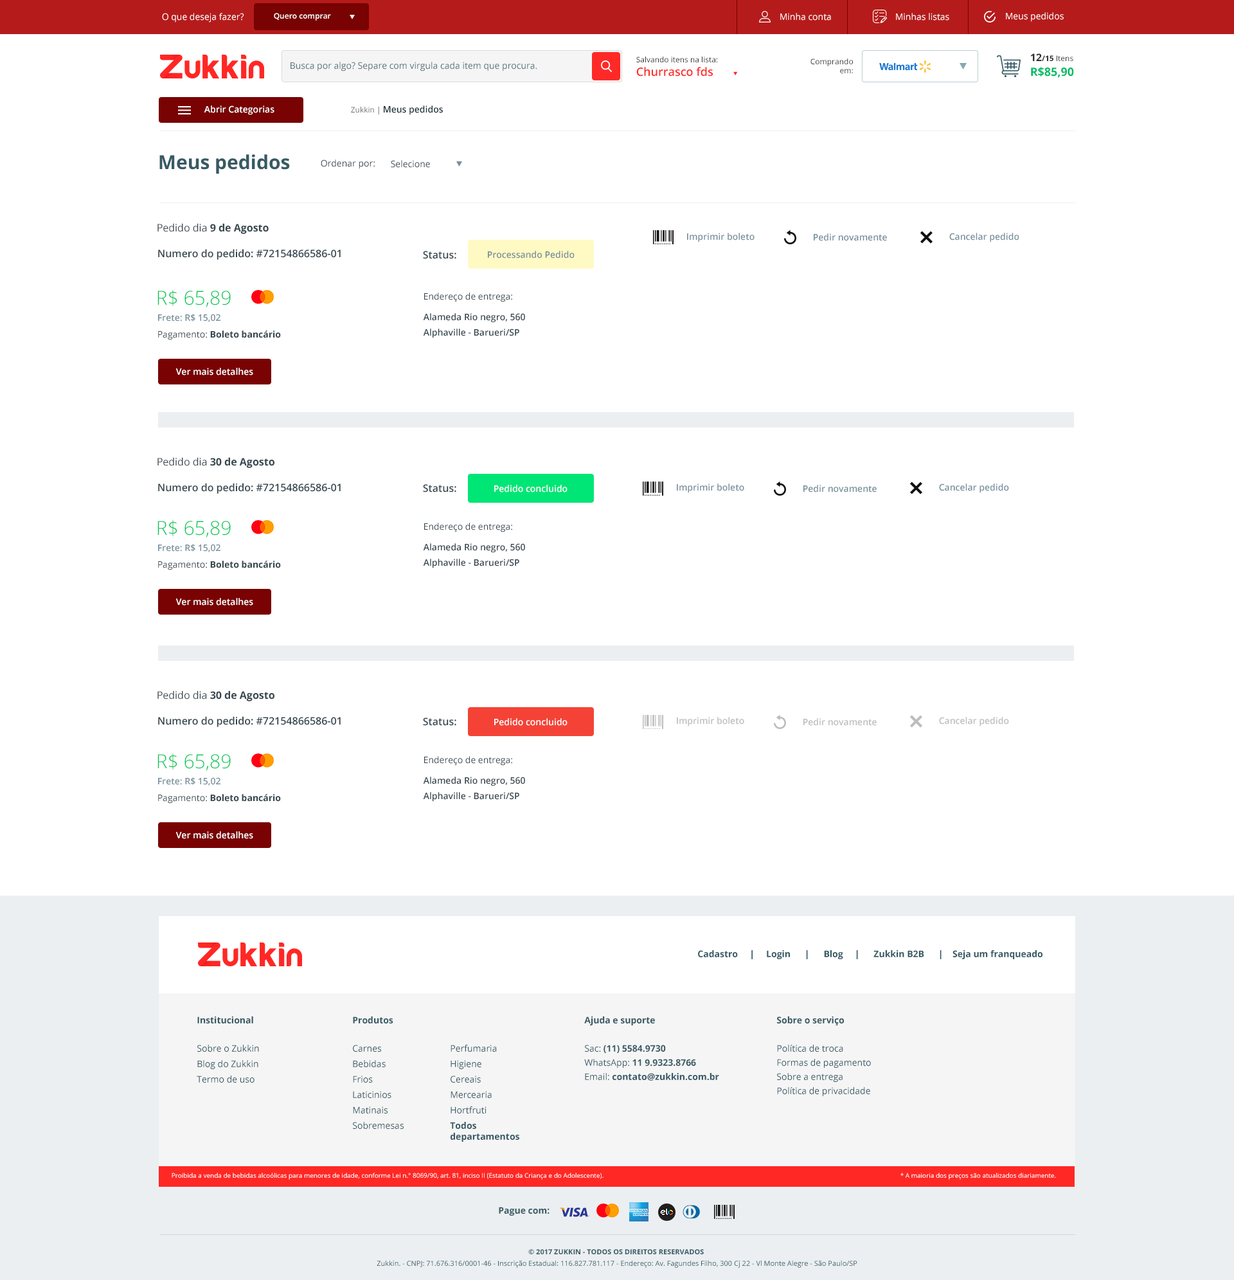
<style>
.page{position:relative;width:1234px;height:1280px;background:#ffffff}
.page>*{position:absolute;margin:0}
.t1{font:9px "OpenSans";color:#ffffff}
.t2{font:7.7px "OpenSans-Semibold";color:#ffffff}
.t3{font:11.6px/14.8px "OpenSans-Bold";color:#00bc65}
.t4{font:10.3px/14.8px "OpenSans-Bold";color:#303030}
.t5{font:7.7px/14.8px "OpenSans-Bold";color:#303030}
.t6{font:7.7px/14.8px "OpenSans";color:#303030}
.t7{font:9px "OpenSans";color:#536f76}
.t8{font:7.7px/13.5px "OpenSans";color:#303030}
.t9{font:11.6px/13.5px "OpenSans-Semibold";color:#ff2a28}
.t10{font:7.7px/9px "OpenSans";color:#303030}
.t11{font:9px "OpenSans-Semibold";color:#ffffff}
.t12{font:9px "OpenSans-Semibold";color:#1a2e35}
.t13{font:7.7px "OpenSans";color:#6e6e6e}
.t14{font:19.3px "OpenSans-Bold";color:#375a64}
.t15{font:9px "OpenSans";color:#37474f}
.t16{font:10.3px "OpenSans-Bold";color:#37474f}
.t17{font:10.3px "OpenSans";color:#37474f}
.t18{font:9px "OpenSans-Semibold";color:#78909c}
.t19{font:30.9px "OpenSans-Semibold";color:#101010}
.t20{font:10.3px "OpenSans-Semibold";color:#37474f}
.t21{font:19.3px "OpenSans-Light";color:#00c853}
.t22{font:9px/15.4px "OpenSans-Semibold";color:#37474f}
.t23{font:9px/24.4px "OpenSans";color:#37474f}
.t24{font:9px/20.6px "OpenSans-Semibold";color:#37474f}
.t25{font:9px "OpenSans-Bold";color:#37474f}
.t26{font:9px "OpenSans-Semibold";color:#bdbdbd}
.t27{font:30.9px "OpenSans-Semibold";color:#bdbdbd}
.t28{font:9px "OpenSans-Bold";color:#375a64}
.t29{font:9px/15.4px "OpenSans";color:#375a64}
.t30{font:9px/12.9px "OpenSans-Bold";color:#375a64}
.t31{font:9px/14.1px "OpenSans-Bold";color:#375a64}
.t32{font:9px/14.1px "OpenSans";color:#375a64}
.t33{font:9px/15.4px "OpenSans-Bold";color:#375a64}
.t34{font:9px/10.9px "OpenSans-Bold";color:#375a64}
.t35{font:6.4px "OpenSans";color:#ffffff}
.t36{font:7.1px/11.6px "OpenSans";color:#375a64}
.t37{font:7.1px/11.6px "OpenSans-Bold";color:#375a64}
</style>
<div class="page">
<p class="t1" style="left:162px;top:13px;width:82px;height:9px">O que deseja fazer?</p>
<p class="t2" style="left:274px;top:13px;width:57px;height:8px">Quero comprar</p>
<p class="t1" style="left:780px;top:13px;width:51px;height:8px">Minha conta</p>
<p class="t1" style="left:896px;top:13px;width:54px;height:8px">Minhas listas</p>
<p class="t1" style="left:1006px;top:12px;width:58px;height:10px">Meus pedidos</p>
<p class="t3" style="left:1030px;top:53px;width:44px;height:25px"><span class="t4">12</span><span class="t5">/15</span><span class="t6"> Itens<br></span>R$85,90</p>
<p class="t7" style="left:291px;top:62px;width:246px;height:9px">Busca por algo? Separe com virgula cada item que procura.</p>
<p class="t8" style="left:636px;top:57px;width:81px;height:19px">Salvando itens na lista:<br><span class="t9">Churrasco fds</span></p>
<p class="t10" style="left:811px;top:59px;width:42px;height:14px;text-align:right">Comprando<br>em:</p>
<p class="t11" style="left:204px;top:105px;width:70px;height:10px">Abrir Categorias</p>
<p class="t12" style="left:351px;top:105px;width:92px;height:10px"><span class="t13">Zukkin | </span>Meus pedidos</p>
<p class="t14" style="left:159px;top:154px;width:131px;height:20px">Meus pedidos</p>
<p class="t15" style="left:321px;top:159px;width:54px;height:10px">Ordenar por:</p>
<p class="t15" style="left:391px;top:160px;width:39px;height:8px">Selecione</p>
<p class="t16" style="left:158px;top:223px;width:111px;height:11px"><span class="t17">Pedido dia</span> 9 de Agosto</p>
<p class="t18" style="left:687px;top:233px;width:68px;height:9px">Imprimir boleto</p>
<p class="t18" style="left:814px;top:233px;width:73px;height:8px">Pedir novamente</p>
<p class="t19" style="left:920px;top:231px;width:13px;height:13px;rotate:-45deg">+</p>
<p class="t18" style="left:950px;top:233px;width:70px;height:9px">Cancelar pedido</p>
<p class="t20" style="left:158px;top:249px;width:183px;height:11px">Numero do pedido: #72154866586-01</p>
<p class="t20" style="left:423px;top:251px;width:33px;height:8px">Status:</p>
<p class="t18" style="left:488px;top:251px;width:87px;height:7px">Processando Pedido</p>
<p class="t21" style="left:158px;top:290px;width:73px;height:17px">R$ 65,89</p>
<p class="t22" style="left:423px;top:292px;width:102px;height:46px"><span class="t23">Endereço de entrega:<br></span><span class="t24">Alameda Rio negro, 560<br></span>Alphaville - Barueri/SP</p>
<p class="t18" style="left:158px;top:314px;width:63px;height:8px">Frete: R$ 15,02</p>
<p class="t25" style="left:158px;top:330px;width:123px;height:10px"><span class="t15">Pagamento:</span> Boleto bancário</p>
<p class="t11" style="left:176px;top:368px;width:77px;height:7px">Ver mais detalhes</p>
<p class="t16" style="left:158px;top:457px;width:116px;height:11px"><span class="t17">Pedido dia</span> 30 de Agosto</p>
<p class="t20" style="left:158px;top:483px;width:183px;height:11px">Numero do pedido: #72154866586-01</p>
<p class="t20" style="left:423px;top:484px;width:33px;height:8px">Status:</p>
<p class="t11" style="left:494px;top:485px;width:74px;height:7px">Pedido concluido</p>
<p class="t18" style="left:677px;top:483px;width:67px;height:10px">Imprimir boleto</p>
<p class="t18" style="left:804px;top:485px;width:73px;height:7px">Pedir novamente</p>
<p class="t19" style="left:910px;top:482px;width:13px;height:12px;rotate:-45deg">+</p>
<p class="t18" style="left:939px;top:483px;width:70px;height:10px">Cancelar pedido</p>
<p class="t21" style="left:158px;top:520px;width:73px;height:17px">R$ 65,89</p>
<p class="t22" style="left:423px;top:523px;width:102px;height:45px"><span class="t23">Endereço de entrega:<br></span><span class="t24">Alameda Rio negro, 560<br></span>Alphaville - Barueri/SP</p>
<p class="t18" style="left:158px;top:544px;width:63px;height:8px">Frete: R$ 15,02</p>
<p class="t25" style="left:158px;top:561px;width:123px;height:9px"><span class="t15">Pagamento:</span> Boleto bancário</p>
<p class="t11" style="left:176px;top:598px;width:77px;height:8px">Ver mais detalhes</p>
<p class="t16" style="left:158px;top:690px;width:116px;height:11px"><span class="t17">Pedido dia</span> 30 de Agosto</p>
<p class="t20" style="left:158px;top:716px;width:183px;height:11px">Numero do pedido: #72154866586-01</p>
<p class="t20" style="left:423px;top:717px;width:33px;height:9px">Status:</p>
<p class="t11" style="left:494px;top:718px;width:74px;height:8px">Pedido concluido</p>
<p class="t26" style="left:677px;top:717px;width:67px;height:9px">Imprimir boleto</p>
<p class="t26" style="left:804px;top:718px;width:73px;height:8px">Pedir novamente</p>
<p class="t27" style="left:910px;top:715px;width:13px;height:13px;rotate:-45deg">+</p>
<p class="t26" style="left:939px;top:717px;width:70px;height:9px">Cancelar pedido</p>
<p class="t21" style="left:158px;top:753px;width:73px;height:18px">R$ 65,89</p>
<p class="t22" style="left:423px;top:756px;width:102px;height:46px"><span class="t23">Endereço de entrega:<br></span><span class="t24">Alameda Rio negro, 560<br></span>Alphaville - Barueri/SP</p>
<p class="t18" style="left:158px;top:777px;width:63px;height:9px">Frete: R$ 15,02</p>
<p class="t25" style="left:158px;top:794px;width:123px;height:10px"><span class="t15">Pagamento:</span> Boleto bancário</p>
<p class="t11" style="left:176px;top:831px;width:77px;height:8px">Ver mais detalhes</p>
<p class="t28" style="left:698px;top:950px;width:345px;height:9px">Cadastro     |     Login      |      Blog     |      Zukkin B2B      |    Seja um franqueado</p>
<p class="t29" style="left:197px;top:1016px;width:62px;height:67px"><span class="t30">Institucional<br><br></span>Sobre o Zukkin<br>Blog do Zukkin<br>Termo de uso</p>
<p class="t29" style="left:353px;top:1016px;width:51px;height:113px"><span class="t30">Produtos<br><br></span>Carnes<br>Bebidas<br>Frios<br>Laticinios<br>Matinais<br>Sobremesas</p>
<p class="t31" style="left:584px;top:1016px;width:135px;height:65px">Ajuda e suporte<br><br><span class="t32">Sac: </span>(11) 5584.9730<br><span class="t32">WhatsApp: </span>11 9.9323.8766<br><span class="t32">Email: </span>contato@zukkin.com.br</p>
<p class="t32" style="left:777px;top:1016px;width:94px;height:80px"><span class="t31">Sobre o serviço<br><br></span>Política de troca<br>Formas de pagamento<br>Sobre a entrega<br>Política de privacidade</p>
<p class="t29" style="left:450px;top:1045px;width:69px;height:97px">Perfumaria<br>Higiene<br>Cereais<br>Mercearia<br>Hortfruti<br><span class="t33">Todos<br></span><span class="t34">departamentos</span></p>
<p class="t35" style="left:172px;top:1173px;width:432px;height:7px">Proibida a venda de bebidas alcoólicas para menores de idade, conforme Lei n.° 8069/90, art. 81, inciso II (Estatuto da Criança e do Adolescente).</p>
<p class="t35" style="left:901px;top:1173px;width:155px;height:7px">* A maioria dos preços são atualizados diariamente.</p>
<p class="t28" style="left:499px;top:1207px;width:51px;height:9px">Pague com:</p>
<p class="t36" style="left:377px;top:1249px;width:481px;height:19px;text-align:center"><span class="t37">© 2017 ZUKKIN - TODOS OS DIREITOS RESERVADOS <br></span>Zukkin. - CNPJ: 71.676.316/0001-46 - Inscrição Estadual: 116.827.781.117 - Endereço: Av. Fagundes Filho, 300 Cj 22 - Vl Monte Alegre - São Paulo/SP</p>
</div>
